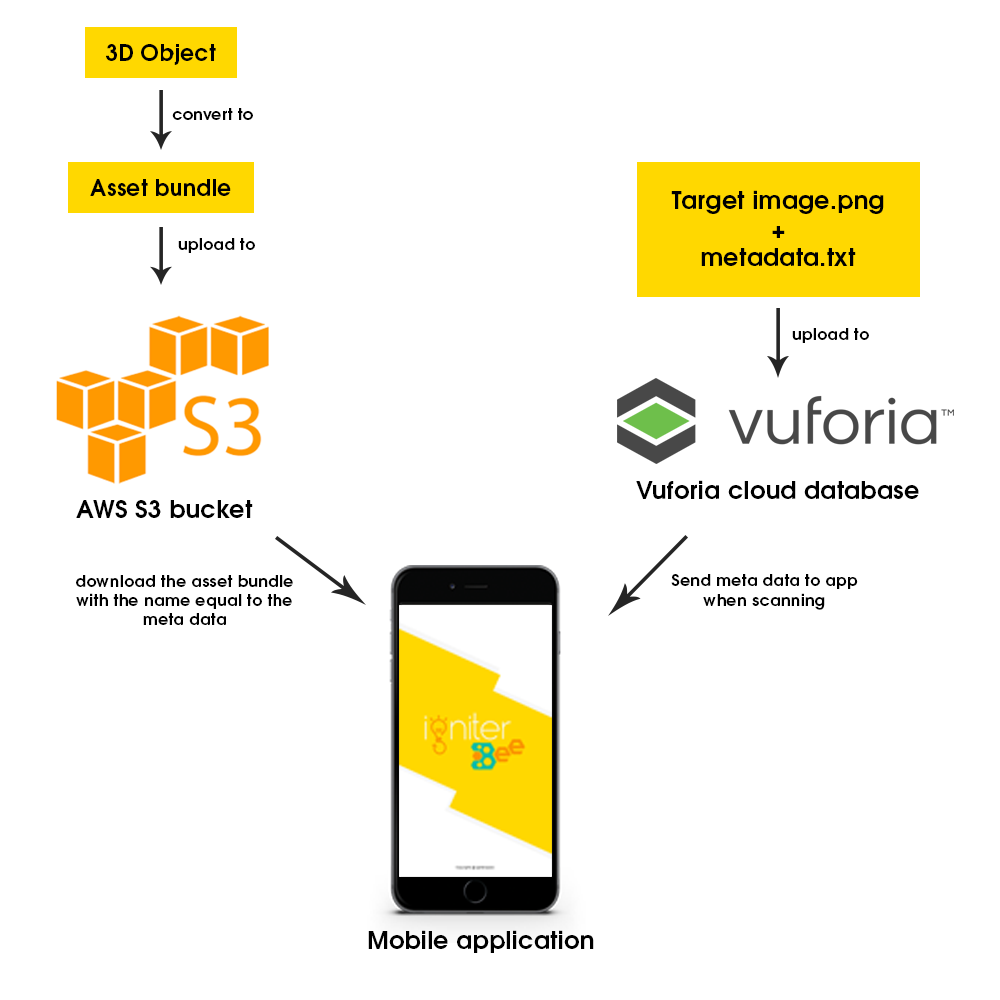
<style>
.page{position:relative;width:1000px;height:1000px;background:#ffffff}
.page>*{position:absolute;margin:0}
.t1{font:21.8px "TeXGyreAdventor-Bold";letter-spacing:0.02em;color:#000000}
.t2{font:16px "TeXGyreAdventor-Bold";letter-spacing:0.02em;color:#000000}
.t3{font:24px "TeXGyreAdventor-Bold";letter-spacing:0.02em;color:#000000}
</style>
<div class="page">
<p class="t1" style="left:106px;top:44px;width:110px;height:21px">3D Object</p>
<p class="t2" style="left:172px;top:108px;width:81px;height:12px">convert to</p>
<p class="t1" style="left:90px;top:179px;width:141px;height:17px">Asset bundle</p>
<p class="t3" style="left:671px;top:190px;width:213px;height:76px;text-align:center">Target image.png<br>+<br>metadata.txt</p>
<p class="t2" style="left:178px;top:238px;width:77px;height:15px">upload to</p>
<p class="t2" style="left:792px;top:328px;width:77px;height:15px">upload to</p>
<p class="t3" style="left:636px;top:480px;width:283px;height:19px">Vuforia cloud database</p>
<p class="t3" style="left:76px;top:500px;width:177px;height:18px">AWS S3 bucket</p>
<p class="t2" style="left:76px;top:575px;width:217px;height:50px;text-align:center">download the asset bundle with the name equal to the meta data</p>
<p class="t2" style="left:671px;top:574px;width:187px;height:36px;text-align:center">Send meta data to app when scanning</p>
<p class="t3" style="left:368px;top:930px;width:226px;height:23px">Mobile application</p>
</div>
